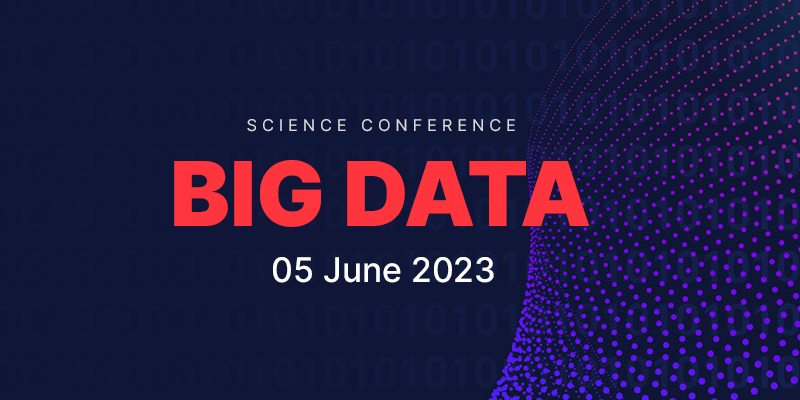
<style>
.page{position:relative;width:800px;height:400px;background:#101638}
.page>*{position:absolute;margin:0}
.t1{font:16.3px "Inter-Regular";letter-spacing:0.3em;color:#dbdbde}
.t2{font:89.5px "Inter-Black";color:#ff353e}
.t3{font:33.9px "Inter-Medium";color:#ffffff}
</style>
<div class="page">
<p class="t1" style="left:247px;top:119px;width:268px;height:13px">SCIENCE CONFERENCE</p>
<p class="t2" style="left:174px;top:160px;width:416px;height:67px">BIG DATA</p>
<p class="t3" style="left:273px;top:257px;width:221px;height:26px">05 June 2023</p>
</div>
